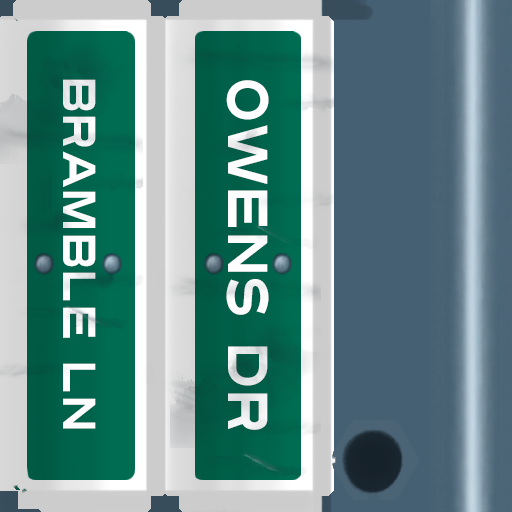
<style>
.page{position:relative;width:512px;height:512px}
.page>*{position:absolute;margin:0}
.t1{font:46px "Turnpike";color:#fefeff;scale:0.75 1}
.t2{font:56px "Turnpike";color:#fefeff;scale:0.75 1}
</style>
<div class="page">
<p class="t1" style="left:63px;top:79px;width:33px;height:350px;rotate:90deg">Bramble Ln</p>
<p class="t2" style="left:226px;top:80px;width:43px;height:350px;rotate:90deg">Owens Dr</p>
</div>
